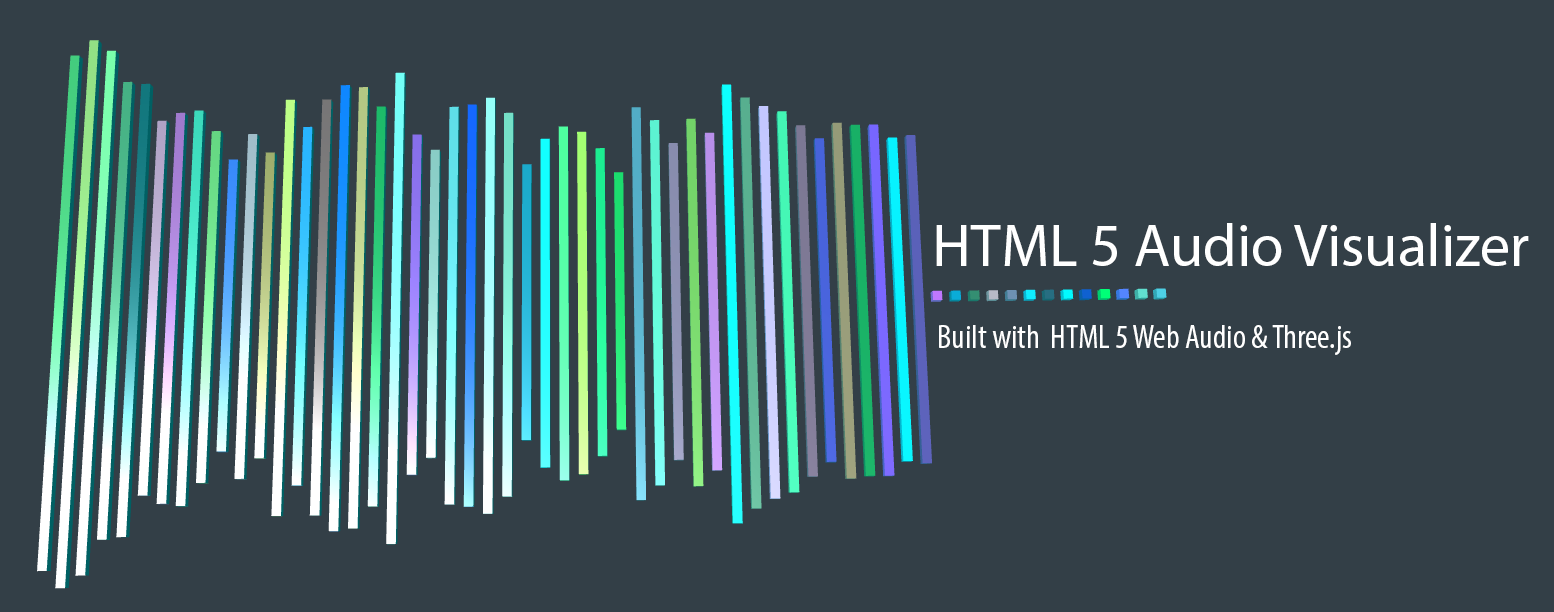
<style>
.page{position:relative;width:1554px;height:612px;background:#333f47}
.page>*{position:absolute;margin:0}
.t1{font:60px "MyriadPro-Regular";color:#ffffff}
.t2{font:34px "MyriadPro-Cond";color:#ffffff}
</style>
<div class="page">
<p class="t1" style="left:936px;top:223px;width:593px;height:43px">HTML 5 Audio Visualizer</p>
<p class="t2" style="left:939px;top:325px;width:412px;height:30px">Built with  HTML 5 Web Audio &amp; Three.js</p>
</div>
